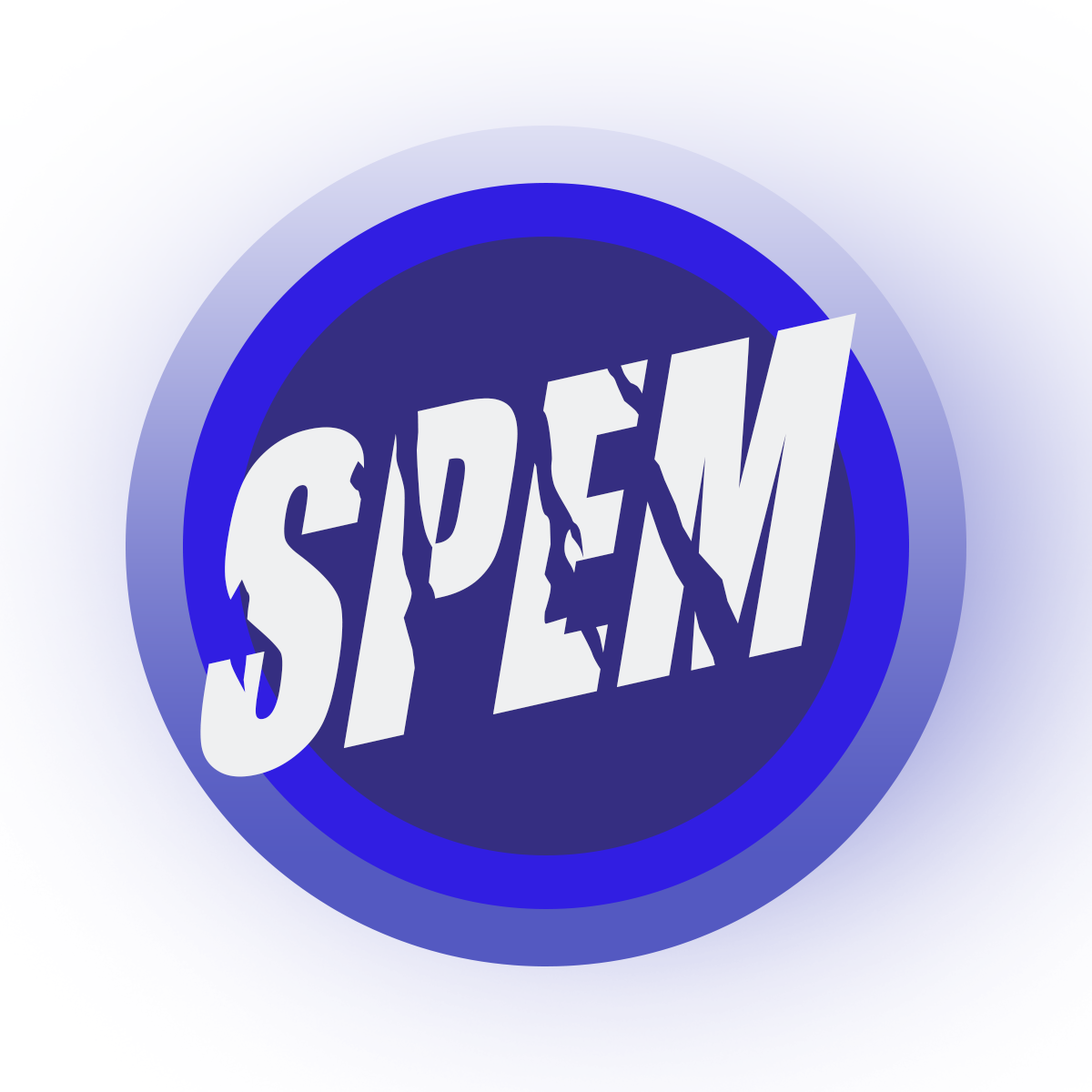
<style>
.page{position:relative;width:1092px;height:1092px}
.page>*{position:absolute;margin:0}
.t1{font:318.6px "Insomnia-Regular";color:#eff0f1;scale:0.67 1}
</style>
<div class="page">
<p class="t1" style="left:200px;top:313px;width:656px;height:464px;rotate:-13deg">spem</p>
</div>
